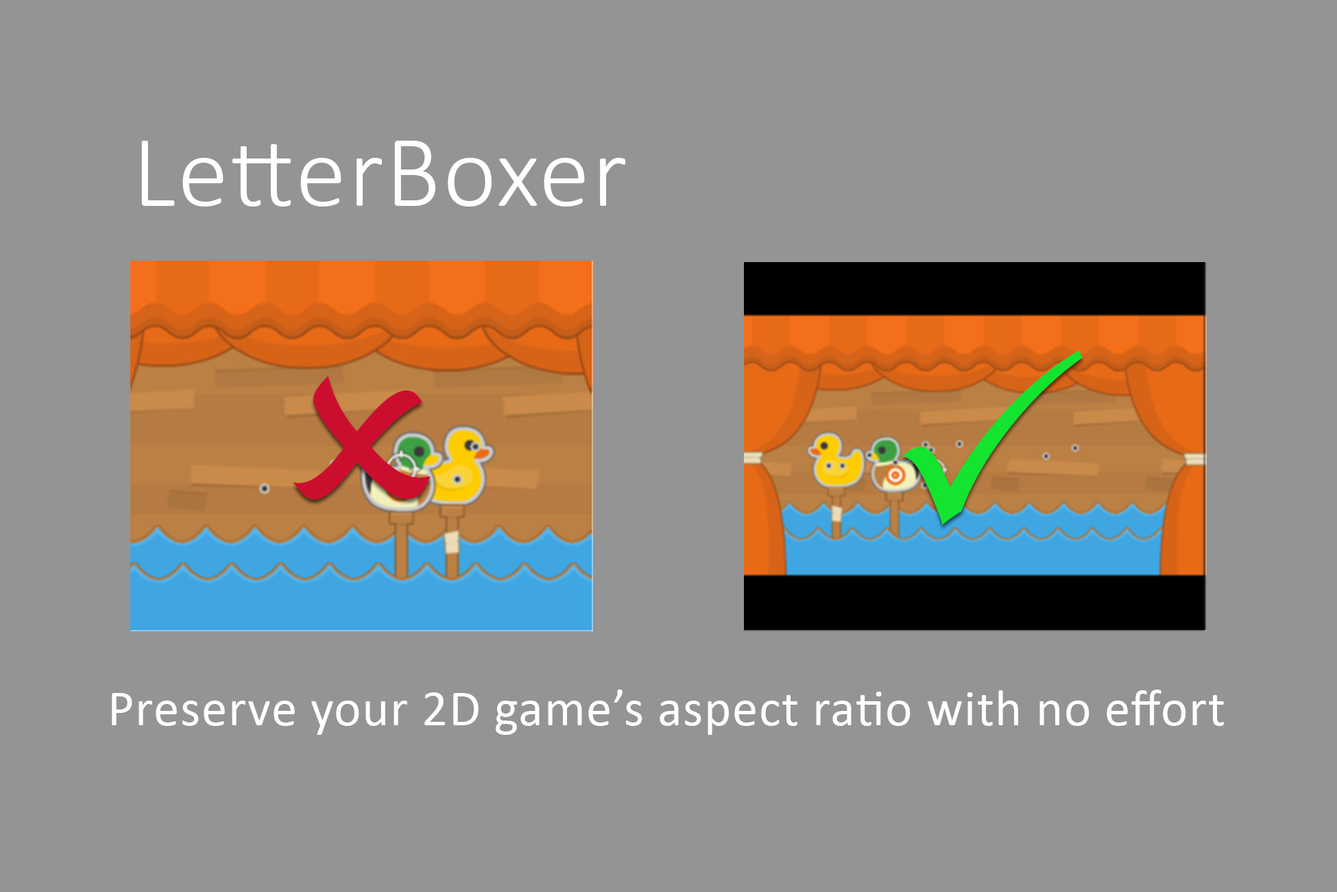
<style>
.page{position:relative;width:1337px;height:892px;background:#949494}
.page>*{position:absolute;margin:0}
.t1{font:102.9px "Calibri-Light";letter-spacing:0.02em;color:#ffffff}
.t2{font:51.4px "Calibri";letter-spacing:0.02em;color:#ffffff}
</style>
<div class="page">
<p class="t1" style="left:141px;top:141px;width:484px;height:65px">LetterBoxer</p>
<p class="t2" style="left:112px;top:689px;width:1112px;height:46px">Preserve your 2D game’s aspect ratio with no effort</p>
</div>
